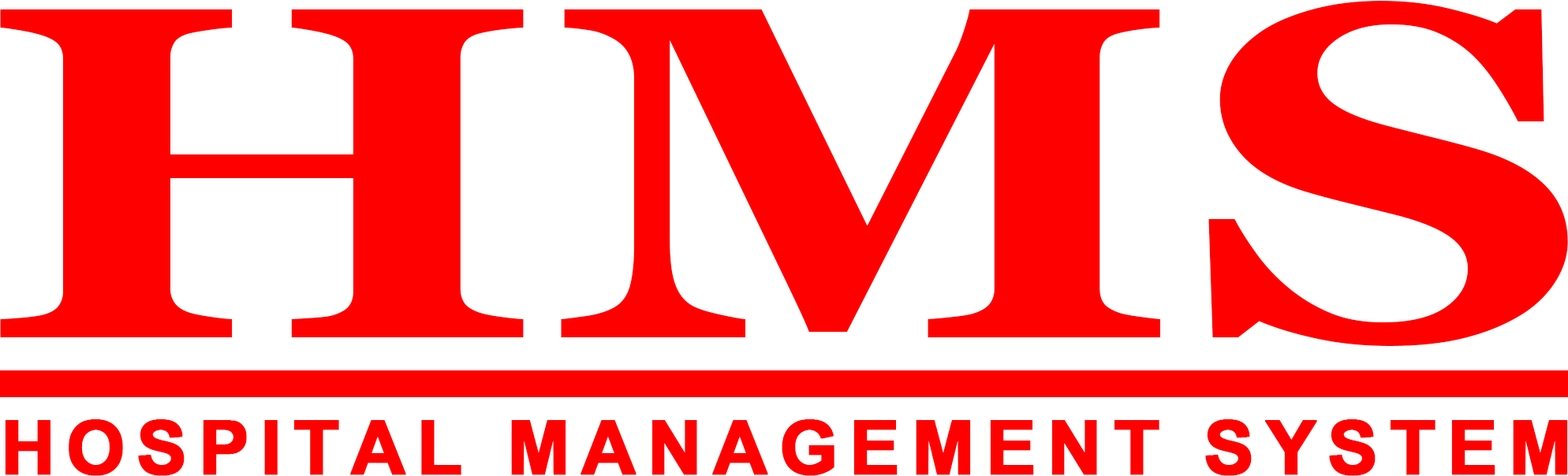
<style>
.page{position:relative;width:1568px;height:476px;background:#ffffff}
.page>*{position:absolute;margin:0}
.t1{font:472.9px "Georgia-Bold";letter-spacing:0.01em;color:#ff0000;text-transform:uppercase;scale:1.31 1}
.t2{font:73.8px "Arial-BoldMT";letter-spacing:0.13em;color:#ff0000;text-transform:uppercase;font-weight:bold}
</style>
<div class="page">
<p class="t1" style="left:0px;top:0px;width:1568px;height:346px">HMS</p>
<p class="t2" style="left:5px;top:420px;width:1563px;height:56px">Hospital Management system</p>
</div>
